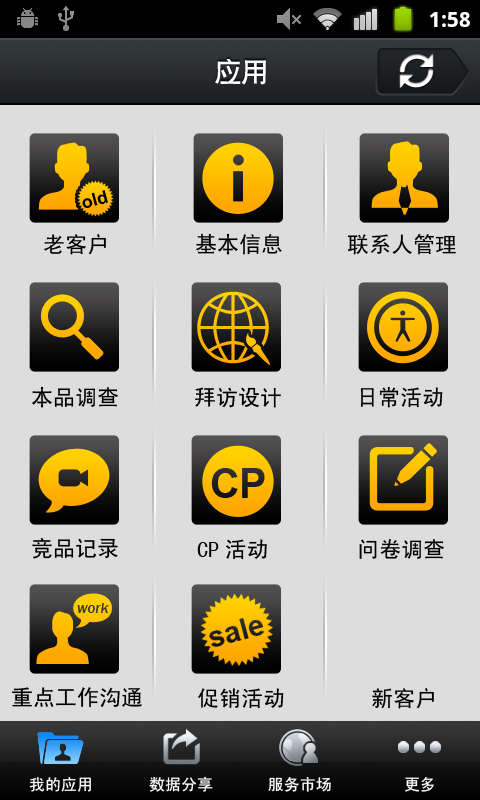
<style>
.page{position:relative;width:480px;height:800px;background:#dddddd}
.page>*{position:absolute;margin:0}
.t1{font:27px "CTCuHeiSJ";color:#ffffff}
.t2{font:17.8px "Arial-BoldMT";color:#000000}
.t3{font:22px "SimHei";color:#000000}
.t4{font:15px "FranklinGothic-MediumItalic";color:#353434}
.t5{font:16px "SimHei";color:#ffffff}
</style>
<div class="page">
<p class="t1" style="left:215px;top:58px;width:51px;height:27px">应用</p>
<p class="t2" style="left:82px;top:190px;width:26px;height:18px;rotate:-15deg">old</p>
<p class="t3" style="left:196px;top:233px;width:86px;height:22px">基本信息</p>
<p class="t3" style="left:44px;top:234px;width:62px;height:21px">老客户</p>
<p class="t3" style="left:347px;top:234px;width:109px;height:21px">联系人管理</p>
<p class="t3" style="left:32px;top:386px;width:86px;height:22px">本品调查</p>
<p class="t3" style="left:195px;top:387px;width:86px;height:21px">拜访设计</p>
<p class="t3" style="left:360px;top:386px;width:83px;height:22px">日常活动</p>
<p class="t3" style="left:32px;top:538px;width:86px;height:21px">竞品记录</p>
<p class="t3" style="left:197px;top:539px;width:70px;height:21px">CP活动</p>
<p class="t3" style="left:359px;top:539px;width:85px;height:20px">问卷调查</p>
<p class="t4" style="left:77px;top:603px;width:32px;height:10px">work</p>
<p class="t3" style="left:12px;top:687px;width:130px;height:21px">重点工作沟通</p>
<p class="t3" style="left:198px;top:688px;width:86px;height:21px">促销活动</p>
<p class="t3" style="left:372px;top:688px;width:62px;height:21px">新客户</p>
<p class="t5" style="left:29px;top:777px;width:62px;height:15px">我的应用</p>
<p class="t5" style="left:149px;top:776px;width:64px;height:16px">数据分享</p>
<p class="t5" style="left:268px;top:776px;width:63px;height:16px">服务市场</p>
<p class="t5" style="left:405px;top:776px;width:29px;height:16px">更多</p>
</div>
